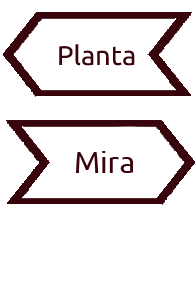
<style>
.page{position:relative;width:196px;height:306px;background:#ffffff}
.page>*{position:absolute;margin:0}
.t1{font:27px "Ubuntu";color:#39050c}
.t2{font:30px "Ubuntu";color:#39050c}
</style>
<div class="page">
<p class="t1" style="left:59px;top:44px;width:76px;height:22px">Planta</p>
<p class="t2" style="left:76px;top:151px;width:57px;height:22px">Mira</p>
</div>
